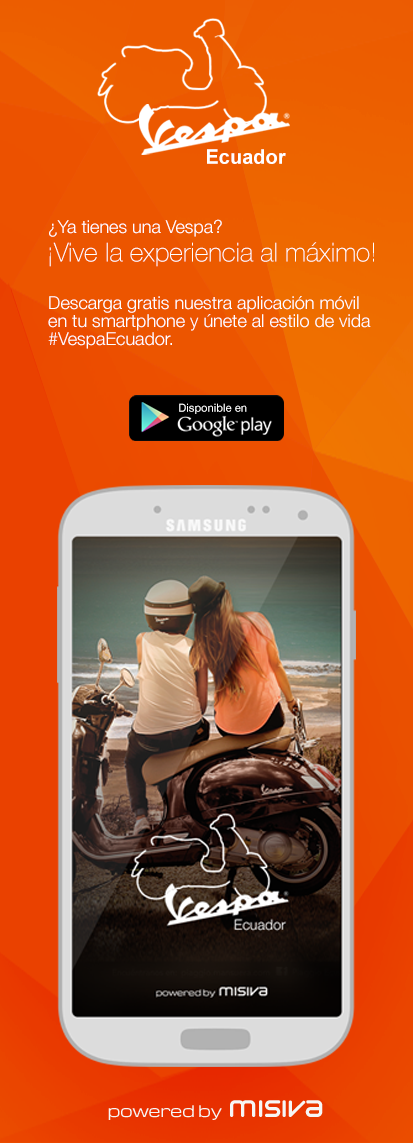
<style>
.page{position:relative;width:413px;height:1143px}
.page>*{position:absolute;margin:0}
.t1{font:20.1px "Arial-BoldMT";color:#ffffff}
.t2{font:18px "HelveticaNeue-Light";color:#ffffff}
.t3{font:26.2px "HelveticaNeue-Thin";color:#ffffff}
.t4{font:18px/18px "HelveticaNeue-Light";color:#ffffff}
</style>
<div class="page">
<p class="t1" style="left:207px;top:149px;width:79px;height:15px">Ecuador</p>
<p class="t2" style="left:49px;top:219px;width:173px;height:18px">¿Ya tienes una Vespa?</p>
<p class="t3" style="left:49px;top:242px;width:325px;height:25px">¡Vive la experiencia al máximo!</p>
<p class="t4" style="left:48px;top:296px;width:323px;height:53px">Descarga gratis nuestra aplicación móvil en tu smartphone y únete al estilo de vida #VespaEcuador.</p>
</div>
